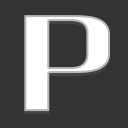
<style>
.page{position:relative;width:128px;height:128px;background:#333333}
.page>*{position:absolute;margin:0}
.t1{font:142.7px "CoolveticaCondensedRg-Regular";color:#ffffff;font-weight:bold;scale:1.93 1}
</style>
<div class="page">
<p class="t1" style="left:24px;top:15px;width:86px;height:97px">P</p>
</div>
